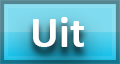
<style>
.page{position:relative;width:120px;height:64px}
.page>*{position:absolute;margin:0}
.t1{font:44.4px "Calibri-Bold";color:#ffffff}
</style>
<div class="page">
<p class="t1" style="left:33px;top:17px;width:51px;height:30px">Uit</p>
</div>
